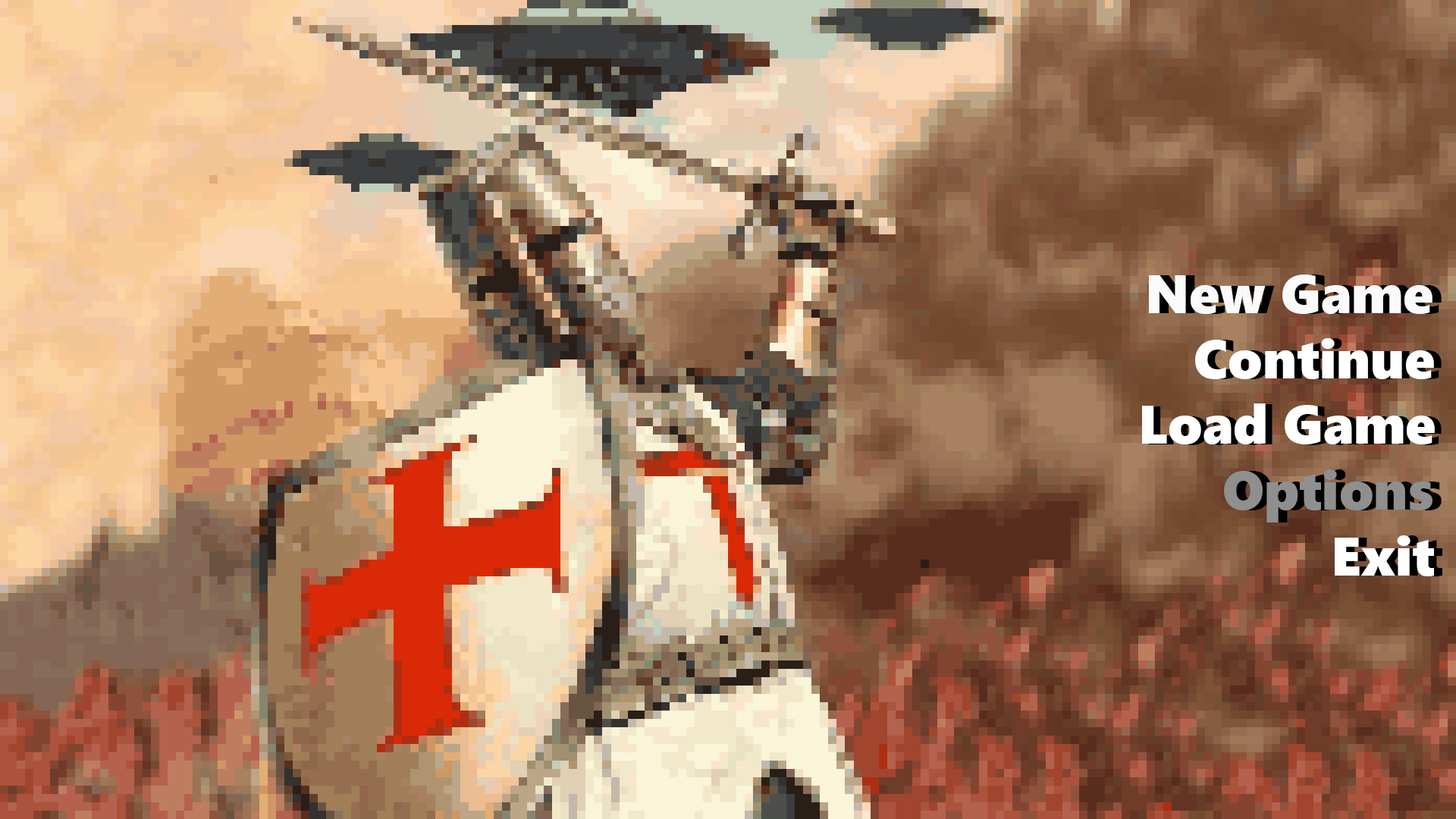
<style>
.page{position:relative;width:1456px;height:819px}
.page>*{position:absolute;margin:0}
.t1{font:54.6px "SegoeUIBlack";color:#fafafa}
.t2{font:54.6px "SegoeUIBlack";color:#ffffff}
.t3{font:54.6px "SegoeUIBlack";color:#8f8f8f}
</style>
<div class="page">
<p class="t1" style="left:1149px;top:275px;width:283px;height:39px">New Game</p>
<p class="t2" style="left:1195px;top:338px;width:239px;height:41px">Continue</p>
<p class="t2" style="left:1142px;top:403px;width:293px;height:41px">Load Game</p>
<p class="t3" style="left:1224px;top:469px;width:208px;height:53px">Options</p>
<p class="t2" style="left:1335px;top:535px;width:99px;height:41px">Exit</p>
</div>
